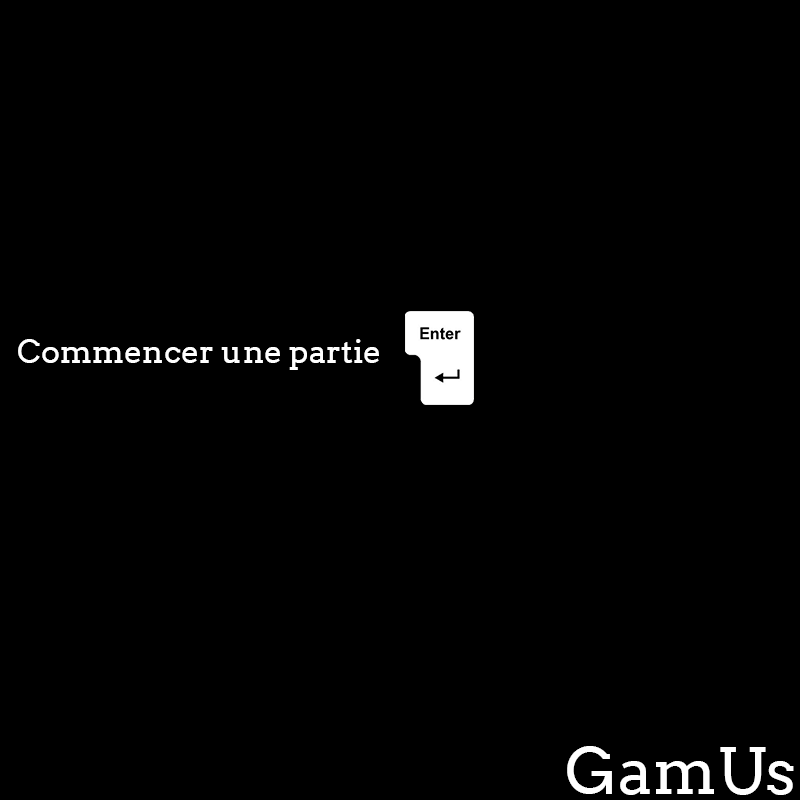
<style>
.page{position:relative;width:800px;height:800px;background:#000000}
.page>*{position:absolute;margin:0}
.t1{font:32px "Arvo";color:#ffffff}
.t2{font:64px "Arvo";color:#ffffff}
</style>
<div class="page">
<p class="t1" style="left:18px;top:339px;width:361px;height:31px">Commencer une partie</p>
<p class="t2" style="left:567px;top:746px;width:227px;height:49px">GamUs</p>
</div>
